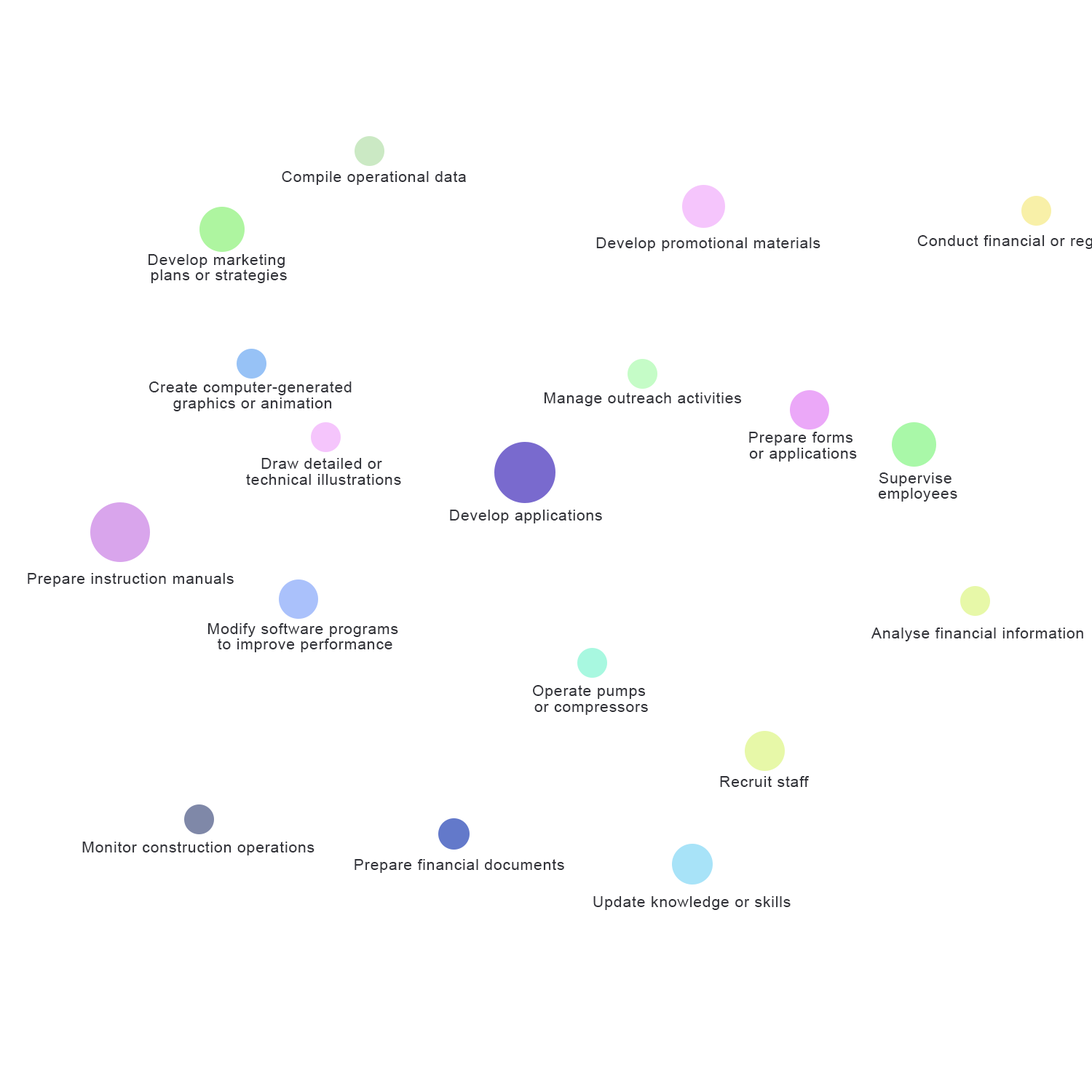
<style>
.page{position:relative;width:1092px;height:1092px;background:#ffffff}
.page>*{position:absolute;margin:0}
.t1{font:15.5px "ArialMT";letter-spacing:0.035em;color:#33343a}
.t2{font:15.5px/15.5px "ArialMT";letter-spacing:0.035em;color:#33343a}
</style>
<div class="page">
<p class="t1" style="left:282px;top:171px;width:184px;height:14px">Compile operational data</p>
<p class="t1" style="left:596px;top:237px;width:224px;height:14px">Develop promotional materials</p>
<p class="t2" style="left:149px;top:254px;width:138px;height:29px;text-align:center">Develop marketing <br>plans or strategies</p>
<p class="t2" style="left:149px;top:381px;width:203px;height:30px;text-align:center">Create computer-generated <br>graphics or animation</p>
<p class="t1" style="left:544px;top:392px;width:198px;height:14px">Manage outreach activities</p>
<p class="t2" style="left:749px;top:432px;width:108px;height:30px;text-align:center">Prepare forms <br>or applications</p>
<p class="t2" style="left:246px;top:458px;width:155px;height:27px;text-align:center">Draw detailed or <br>technical illustrations</p>
<p class="t2" style="left:878px;top:472px;width:79px;height:30px;text-align:center">Supervise <br>employees</p>
<p class="t1" style="left:450px;top:510px;width:152px;height:13px">Develop applications</p>
<p class="t1" style="left:28px;top:573px;width:206px;height:14px">Prepare instruction manuals</p>
<p class="t2" style="left:207px;top:623px;width:191px;height:29px;text-align:center">Modify software programs <br>to improve performance</p>
<p class="t1" style="left:871px;top:628px;width:212px;height:13px">Analyse financial information</p>
<p class="t2" style="left:533px;top:685px;width:115px;height:30px;text-align:center">Operate pumps <br>or compressors</p>
<p class="t1" style="left:720px;top:776px;width:90px;height:11px">Recruit staff</p>
<p class="t1" style="left:82px;top:842px;width:232px;height:13px">Monitor construction operations</p>
<p class="t1" style="left:355px;top:859px;width:209px;height:14px">Prepare financial documents</p>
<p class="t1" style="left:593px;top:896px;width:198px;height:14px">Update knowledge or skills</p>
</div>
